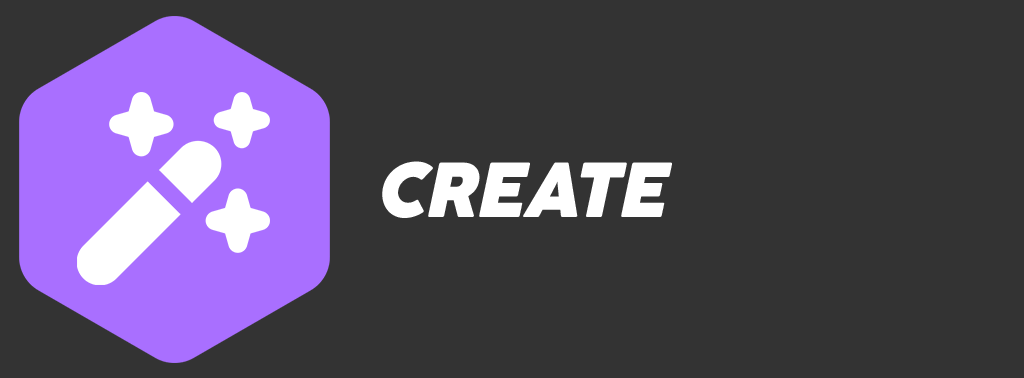
<style>
.page{position:relative;width:1024px;height:378px;background:#333333}
.page>*{position:absolute;margin:0}
.t1{font:72px "CocogooseProTrial-BoldItalic";color:#ffffff}
</style>
<div class="page">
<p class="t1" style="left:382px;top:161px;width:290px;height:57px">CREATE</p>
</div>
